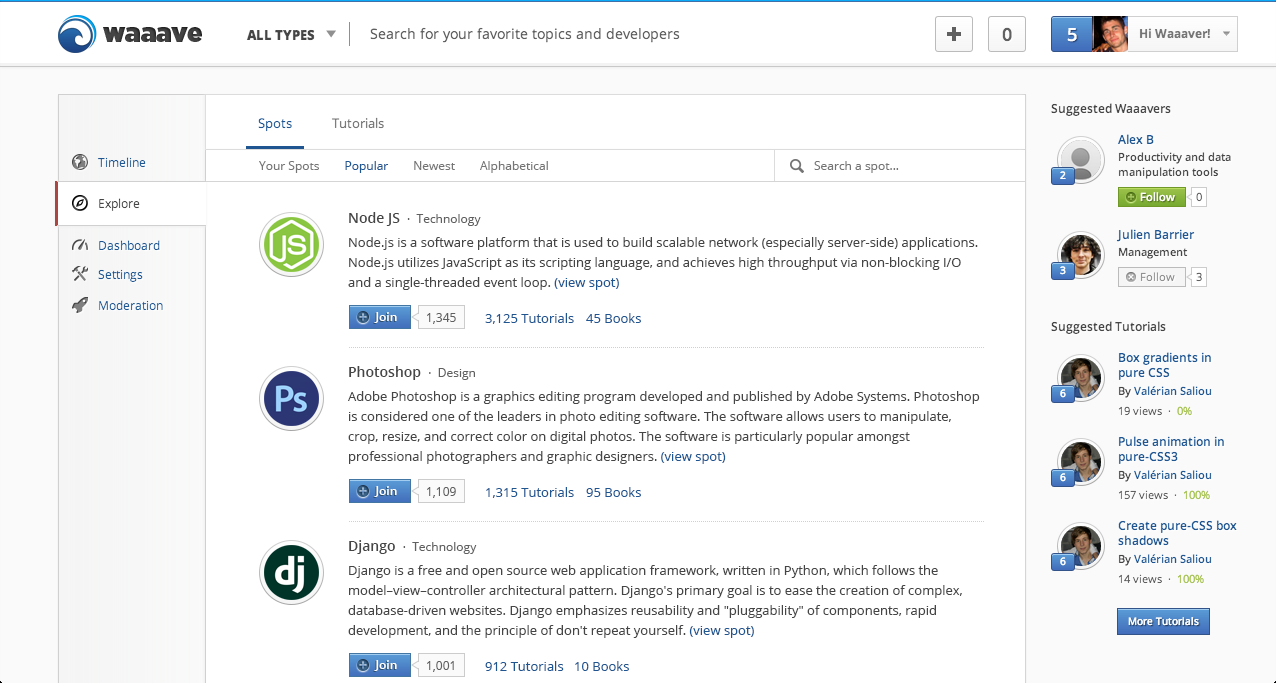
<style>
.page{position:relative;width:1276px;height:683px;background:#ffffff}
.page>*{position:absolute;margin:0}
.t1{font:12px "OpenSans";color:#757575}
.t2{font:12px "OpenSans";color:#1f5691}
.t3{font:12px "OpenSans";color:#606060}
.t4{font:14px "OpenSans-Semibold";color:#454545}
.t5{font:13px/20px "OpenSans";color:#454545}
.t6{font:13px/20px "OpenSans";color:#1f5691}
.t7{font:12px "OpenSans-Semibold";color:#ffffff}
.t8{font:13px "OpenSans";color:#1f5691}
</style>
<div class="page">
<p class="t1" style="left:259px;top:161px;width:289px;height:12px">Your Spots        <span class="t2">Popular        </span>Newest        Alphabetical</p>
<p class="t1" style="left:814px;top:161px;width:85px;height:12px">Search a spot...</p>
<p class="t3" style="left:349px;top:212px;width:132px;height:14px"><span class="t4">Node JS  </span>·  Technology</p>
<p class="t5" style="left:348px;top:237px;width:630px;height:53px">Node.js is a software platform that is used to build scalable network (especially server-side) applications.<br>Node.js utilizes JavaScript as its scripting language, and achieves high throughput via non-blocking I/O<br>and a single-threaded event loop. <span class="t6">(view spot)</span></p>
<p class="t7" style="left:374px;top:312px;width:23px;height:11px">Join</p>
<p class="t3" style="left:427px;top:313px;width:29px;height:11px">1,345</p>
<p class="t8" style="left:485px;top:313px;width:89px;height:11px">3,125 Tutorials</p>
<p class="t8" style="left:586px;top:313px;width:55px;height:10px">45 Books</p>
<p class="t4" style="left:349px;top:366px;width:126px;height:14px">Photoshop  <span class="t3">·  Design</span></p>
<p class="t5" style="left:348px;top:391px;width:632px;height:73px">Adobe Photoshop is a graphics editing program developed and published by Adobe Systems. Photoshop<br>is considered one of the leaders in photo editing software. The software allows users to manipulate,<br>crop, resize, and correct color on digital photos. The software is particularly popular amongst<br>professional photographers and graphic designers. <span class="t6">(view spot)</span></p>
<p class="t7" style="left:374px;top:486px;width:23px;height:11px">Join</p>
<p class="t3" style="left:427px;top:487px;width:29px;height:11px">1,109</p>
<p class="t8" style="left:486px;top:487px;width:88px;height:11px">1,315 Tutorials</p>
<p class="t8" style="left:586px;top:487px;width:55px;height:10px">95 Books</p>
<p class="t3" style="left:349px;top:540px;width:128px;height:14px"><span class="t4">Django  </span>·  Technology</p>
<p class="t5" style="left:348px;top:565px;width:614px;height:73px">Django is a free and open source web application framework, written in Python, which follows the<br>model–view–controller architectural pattern. Django's primary goal is to ease the creation of complex,<br>database-driven websites. Django emphasizes reusability and "pluggability" of components, rapid<br>development, and the principle of don't repeat yourself. <span class="t6">(view spot)</span></p>
<p class="t7" style="left:374px;top:660px;width:23px;height:11px">Join</p>
<p class="t3" style="left:427px;top:661px;width:27px;height:11px">1,001</p>
<p class="t8" style="left:485px;top:661px;width:79px;height:10px">912 Tutorials</p>
<p class="t8" style="left:575px;top:661px;width:54px;height:10px">10 Books</p>
</div>
